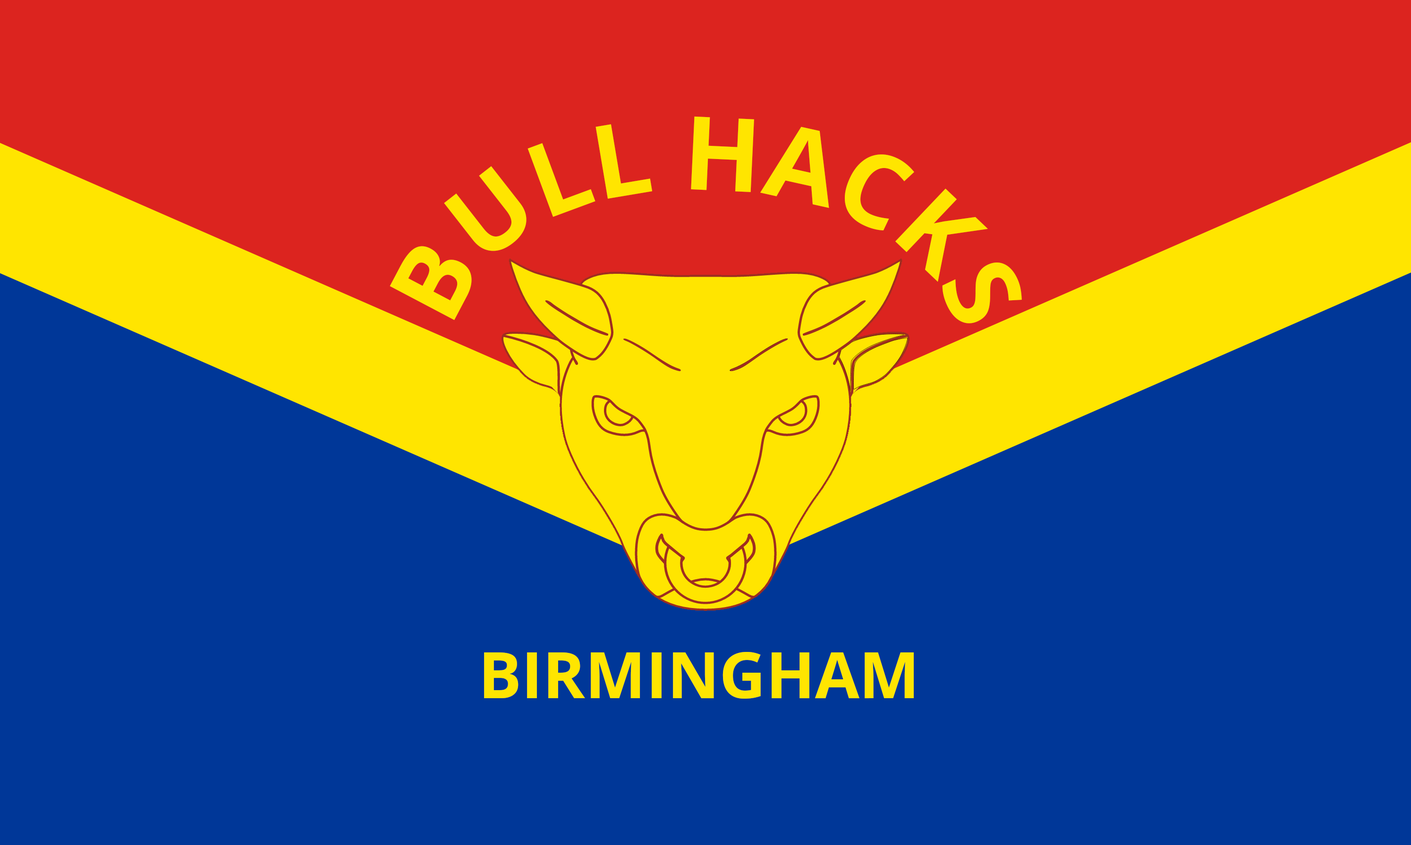
<style>
.page{position:relative;width:1411px;height:845px;background:#003798}
.page>*{position:absolute;margin:0}
.t1{font:102px "OpenSans-Bold";color:#ffe500}
.t2{font:64.2px "OpenSans-Bold";color:#ffe500}
</style>
<div class="page">
<p class="t1" style="left:390px;top:116px;width:632px;height:207px;text-align:center">BULL HACKS</p>
<p class="t2" style="left:484px;top:652px;width:430px;height:47px">BIRMINGHAM</p>
</div>
